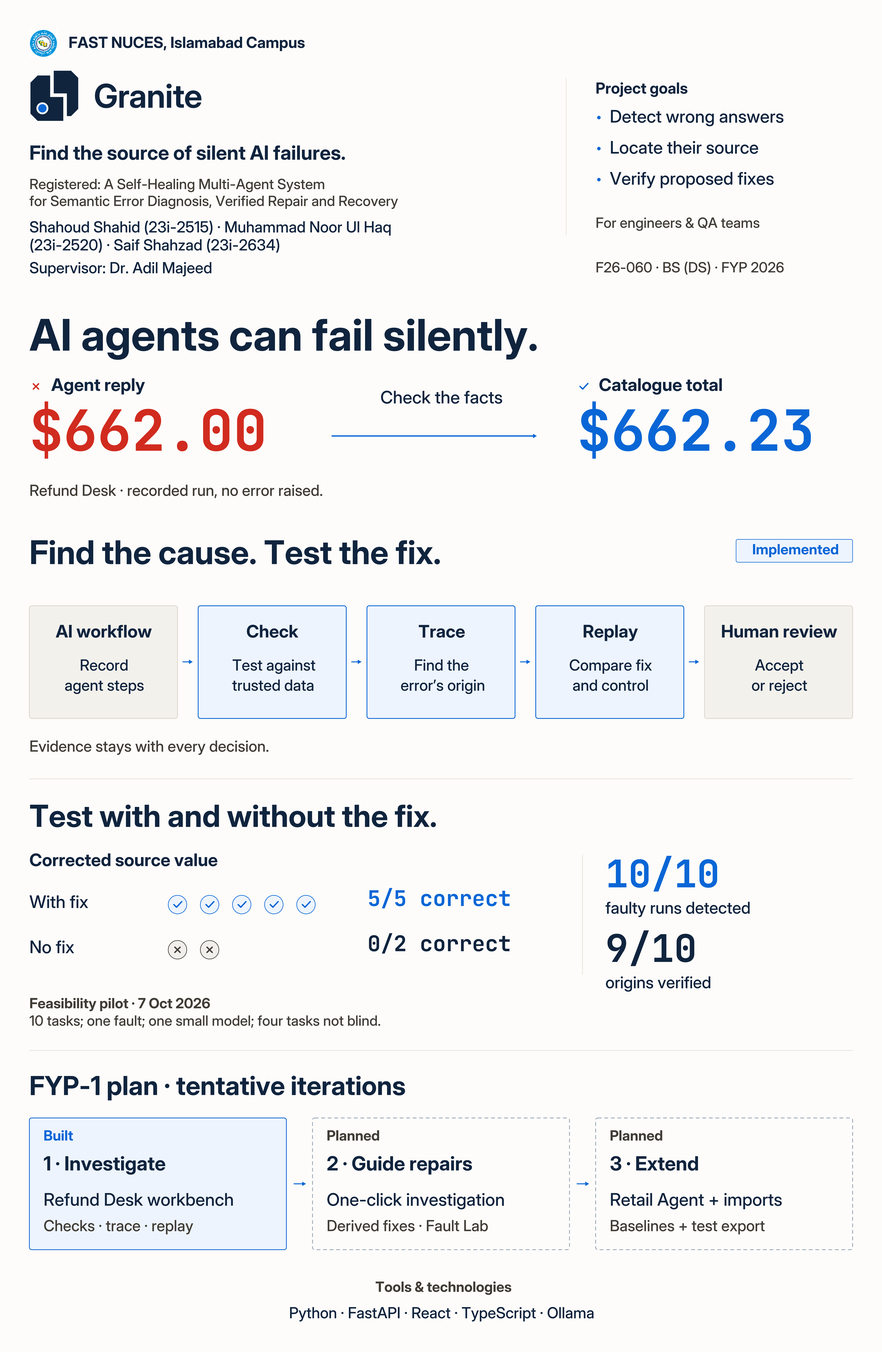
<style>
.page{position:relative;width:882px;height:1352px;background:#fdfcfa}
.page>*{position:absolute;margin:0}
.t1{font:15.2px "Inter-SemiBold";color:#10243e}
.t2{font:15.2px "Inter-Bold";color:#10243e}
.t3{font:17.4px "Inter-Medium";color:#10243e}
.t4{font:19.6px "Inter-SemiBold";color:#10243e}
.t5{font:14.2px "Inter-Medium";color:#403c36}
.t6{font:15.2px "Inter-Medium";color:#10243e}
.t7{font:43.5px "Inter-Bold";color:#10243e}
.t8{font:17.4px "Inter-SemiBold";color:#10243e}
.t9{font:56.6px "JetBrainsMono-SemiBold";color:#d12b1f}
.t10{font:15.2px "Inter-Regular";color:#403c36}
.t11{font:32.7px "Inter-Bold";color:#10243e}
.t12{font:14.2px "Inter-SemiBold";color:#0a66d6}
.t13{font:17.4px "Inter-Bold";color:#10243e}
.t14{font:15.2px "Inter-Regular";color:#10243e}
.t15{font:15.2px "Inter-Medium";color:#403c36}
.t16{font:30.5px "Inter-Bold";color:#10243e}
.t17{font:38.1px "JetBrainsMono-SemiBold";color:#0a66d6}
.t18{font:21.8px "JetBrainsMono-SemiBold";color:#0a66d6}
.t19{font:16.3px "Inter-Medium";color:#10243e}
.t20{font:21.8px "JetBrainsMono-SemiBold";color:#10243e}
.t21{font:38.1px "JetBrainsMono-SemiBold";color:#10243e}
.t22{font:14.2px "Inter-SemiBold";color:#403c36}
.t23{font:14.2px "Inter-Regular";color:#403c36}
.t24{font:26.1px "Inter-Bold";color:#10243e}
.t25{font:19.6px "Inter-Bold";color:#10243e}
</style>
<div class="page">
<p class="t1" style="left:68px;top:36px;width:315px;height:24px">FAST NUCES, Islamabad Campus</p>
<p class="t2" style="left:595px;top:81px;width:127px;height:25px">Project goals</p>
<p class="t3" style="left:609px;top:108px;width:236px;height:29px">Detect wrong answers</p>
<p class="t4" style="left:29px;top:144px;width:419px;height:31px">Find the source of silent AI failures.</p>
<p class="t3" style="left:609px;top:139px;width:202px;height:29px">Locate their source</p>
<p class="t3" style="left:609px;top:170px;width:221px;height:29px">Verify proposed fixes</p>
<p class="t5" style="left:29px;top:178px;width:397px;height:23px">Registered: A Self-Healing Multi-Agent System</p>
<p class="t5" style="left:29px;top:194px;width:494px;height:24px">for Semantic Error Diagnosis, Verified Repair and Recovery</p>
<p class="t6" style="left:29px;top:220px;width:491px;height:25px">Shahoud Shahid (23i-2515) · Muhammad Noor Ul Haq</p>
<p class="t5" style="left:595px;top:216px;width:222px;height:24px">For engineers &amp; QA teams</p>
<p class="t6" style="left:29px;top:238px;width:340px;height:25px">(23i-2520) · Saif Shahzad (23i-2634)</p>
<p class="t6" style="left:29px;top:261px;width:247px;height:25px">Supervisor: Dr. Adil Majeed</p>
<p class="t5" style="left:595px;top:261px;width:256px;height:23px">F26-060 · BS (DS) · FYP 2026</p>
<p class="t7" style="left:29px;top:316px;width:684px;height:67px">AI agents can fail silently.</p>
<p class="t8" style="left:51px;top:377px;width:124px;height:28px">Agent reply</p>
<p class="t8" style="left:598px;top:377px;width:166px;height:28px">Catalogue total</p>
<p class="t3" style="left:380px;top:389px;width:166px;height:29px">Check the facts</p>
<p class="t9" style="left:29px;top:406px;width:323px;height:87px">$662.00</p>
<p class="t10" style="left:29px;top:484px;width:390px;height:24px">Refund Desk · recorded run, no error raised.</p>
<p class="t11" style="left:29px;top:538px;width:552px;height:51px">Find the cause. Test the fix.</p>
<p class="t12" style="left:752px;top:543px;width:115px;height:23px">Implemented</p>
<p class="t13" style="left:55px;top:623px;width:131px;height:29px">AI workflow</p>
<p class="t13" style="left:246px;top:623px;width:72px;height:29px">Check</p>
<p class="t13" style="left:418px;top:623px;width:63px;height:29px">Trace</p>
<p class="t13" style="left:582px;top:623px;width:75px;height:29px">Replay</p>
<p class="t13" style="left:721px;top:623px;width:157px;height:29px">Human review</p>
<p class="t14" style="left:79px;top:658px;width:66px;height:25px">Record</p>
<p class="t14" style="left:232px;top:658px;width:110px;height:25px">Test against</p>
<p class="t14" style="left:414px;top:658px;width:74px;height:25px">Find the</p>
<p class="t14" style="left:569px;top:658px;width:111px;height:25px">Compare fix</p>
<p class="t14" style="left:754px;top:658px;width:66px;height:25px">Accept</p>
<p class="t14" style="left:64px;top:678px;width:107px;height:25px">agent steps</p>
<p class="t14" style="left:232px;top:678px;width:110px;height:25px">trusted data</p>
<p class="t14" style="left:400px;top:678px;width:111px;height:25px">error’s origin</p>
<p class="t14" style="left:572px;top:678px;width:103px;height:25px">and control</p>
<p class="t14" style="left:751px;top:678px;width:75px;height:25px">or reject</p>
<p class="t15" style="left:29px;top:739px;width:326px;height:25px">Evidence stays with every decision.</p>
<p class="t16" style="left:29px;top:802px;width:548px;height:48px">Test with and without the fix.</p>
<p class="t8" style="left:29px;top:852px;width:250px;height:28px">Corrected source value</p>
<p class="t17" style="left:605px;top:857px;width:157px;height:59px">10/10</p>
<p class="t3" style="left:29px;top:894px;width:82px;height:28px">With fix</p>
<p class="t18" style="left:367px;top:889px;width:197px;height:34px">5/5 correct</p>
<p class="t19" style="left:605px;top:900px;width:198px;height:27px">faulty runs detected</p>
<p class="t3" style="left:29px;top:939px;width:63px;height:28px">No fix</p>
<p class="t20" style="left:367px;top:934px;width:197px;height:35px">0/2 correct</p>
<p class="t21" style="left:605px;top:932px;width:126px;height:59px">9/10</p>
<p class="t19" style="left:605px;top:975px;width:145px;height:27px">origins verified</p>
<p class="t22" style="left:29px;top:997px;width:241px;height:23px">Feasibility pilot · 7 Oct 2026</p>
<p class="t23" style="left:29px;top:1014px;width:464px;height:24px">10 tasks; one fault; one small model; four tasks not blind.</p>
<p class="t24" style="left:29px;top:1074px;width:508px;height:41px">FYP-1 plan · tentative iterations</p>
<p class="t12" style="left:43px;top:1129px;width:41px;height:23px">Built</p>
<p class="t22" style="left:326px;top:1129px;width:73px;height:23px">Planned</p>
<p class="t22" style="left:609px;top:1129px;width:73px;height:23px">Planned</p>
<p class="t25" style="left:43px;top:1155px;width:166px;height:31px">1 · Investigate</p>
<p class="t25" style="left:326px;top:1155px;width:199px;height:31px">2 · Guide repairs</p>
<p class="t25" style="left:609px;top:1155px;width:123px;height:31px">3 · Extend</p>
<p class="t3" style="left:43px;top:1192px;width:257px;height:28px">Refund Desk workbench</p>
<p class="t3" style="left:326px;top:1192px;width:241px;height:28px">One-click investigation</p>
<p class="t3" style="left:609px;top:1192px;width:234px;height:28px">Retail Agent + imports</p>
<p class="t10" style="left:43px;top:1219px;width:200px;height:25px">Checks · trace · replay</p>
<p class="t10" style="left:326px;top:1219px;width:215px;height:25px">Derived fixes · Fault Lab</p>
<p class="t10" style="left:609px;top:1219px;width:207px;height:25px">Baselines + test export</p>
<p class="t22" style="left:375px;top:1280px;width:179px;height:24px">Tools &amp; technologies</p>
<p class="t6" style="left:289px;top:1306px;width:412px;height:25px">Python · FastAPI · React · TypeScript · Ollama</p>
</div>
